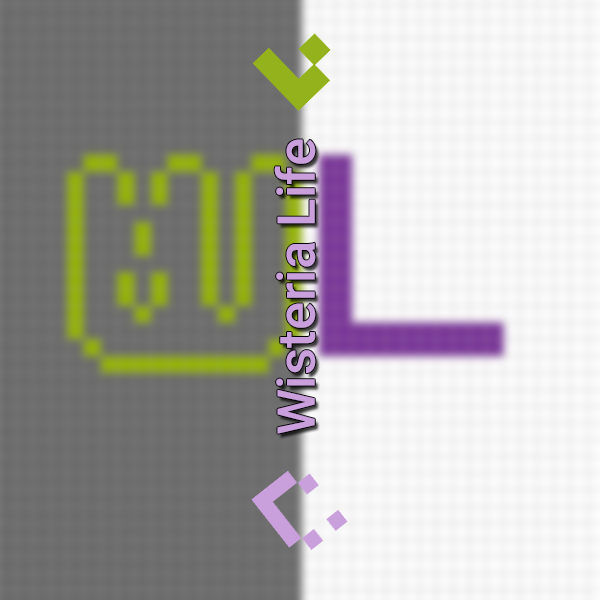
<style>
.page{position:relative;width:600px;height:600px}
.page>*{position:absolute;margin:0}
.t1{font:52.4px "Roboto-Medium";letter-spacing:0.005em;color:#c9a0dc}
</style>
<div class="page">
<p class="t1" style="left:274px;top:139px;width:42px;height:295px;rotate:-90deg">Wisteria Life</p>
</div>
